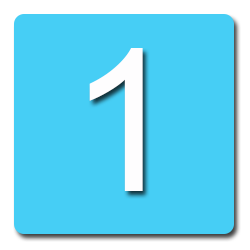
<style>
.page{position:relative;width:250px;height:250px;background:#46cef5}
.page>*{position:absolute;margin:0}
.t1{font:200px "ArialMT";color:#fefdfe}
</style>
<div class="page">
<p class="t1" style="left:89px;top:48px;width:54px;height:143px">1</p>
</div>
